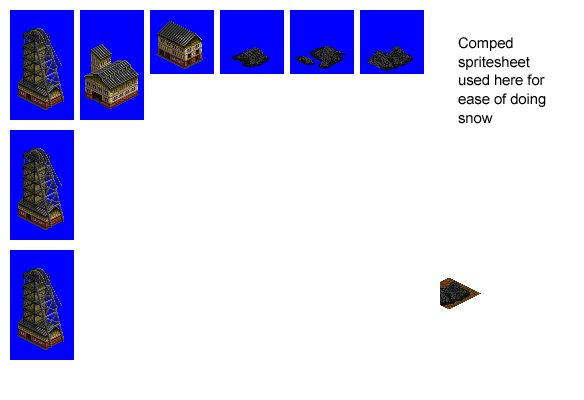
<style>
.page{position:relative;width:584px;height:400px;background:#ffffff}
.page>*{position:absolute;margin:0}
.t1{font:14.7px/18.7px "ArialMT";color:#000000}
</style>
<div class="page">
<p class="t1" style="left:458px;top:37px;width:88px;height:87px">Comped <br>spritesheet<br>used here for<br>ease of doing<br>snow</p>
</div>
